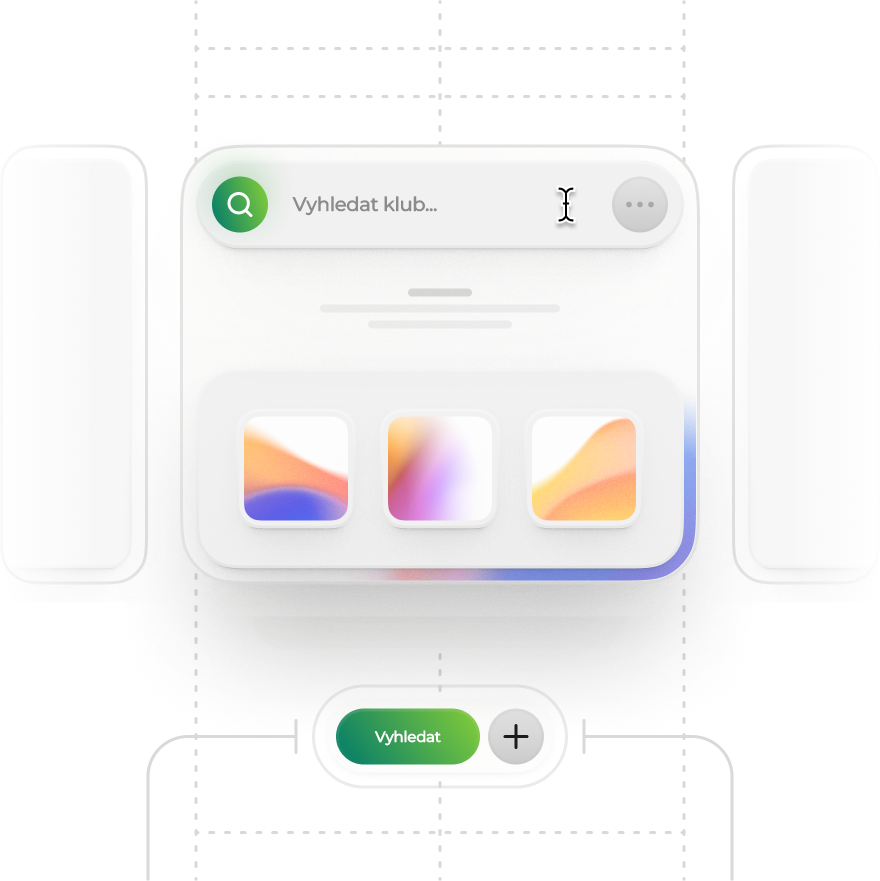
<style>
.page{position:relative;width:880px;height:881px;background:#ffffff}
.page>*{position:absolute;margin:0}
.t1{font:19.5px "Montserrat-Medium";letter-spacing:-0.02em;color:#8b8b8b}
.t2{font:15px "Montserrat-Medium";letter-spacing:-0.02em;color:#ffffff}
</style>
<div class="page">
<p class="t1" style="left:292px;top:196px;width:145px;height:20px">Vyhledat klub...</p>
<p class="t2" style="left:374px;top:730px;width:67px;height:16px">Vyhledat</p>
</div>
